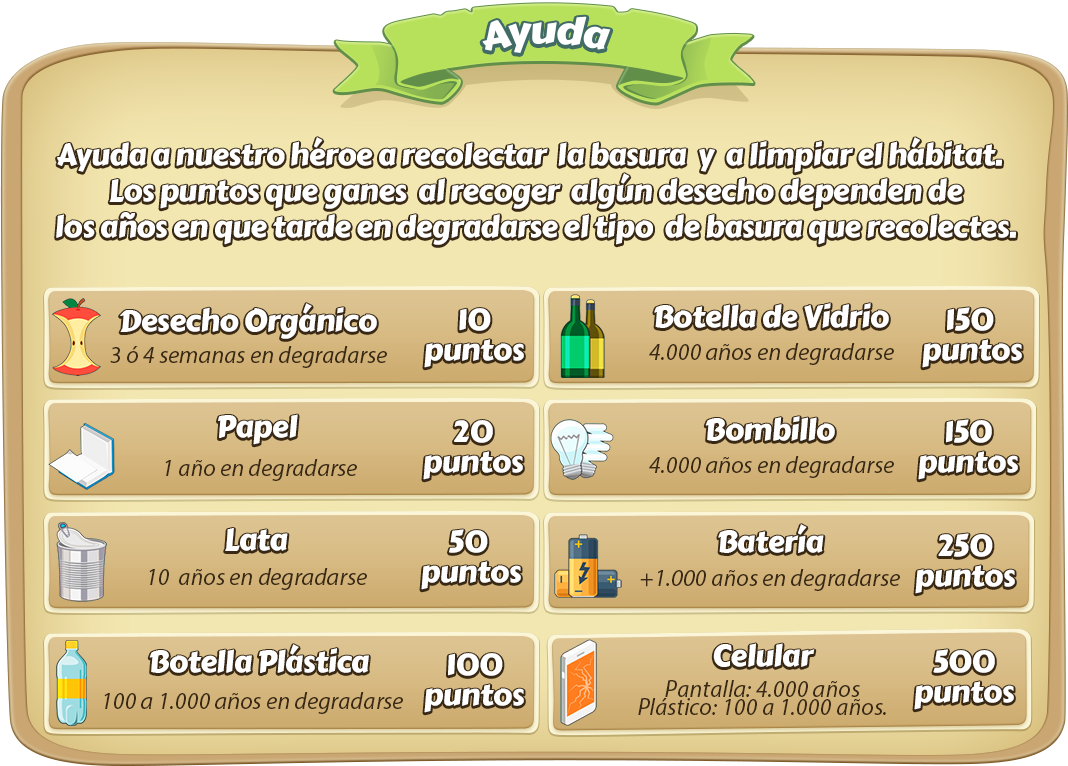
<style>
.page{position:relative;width:1068px;height:766px}
.page>*{position:absolute;margin:0}
.t1{font:38px "CarterOne";letter-spacing:-0.02em;color:#ffffff}
.t2{font:30px "CarterOne";letter-spacing:-0.02em;color:#ffffff}
.t3{font:30px/30px "CarterOne";letter-spacing:-0.02em;color:#ffffff}
.t4{font:24px "MyriadPro-It";color:#382814}
.t5{font:24px/18.3px "MyriadPro-It";color:#382814}
</style>
<div class="page">
<p class="t1" style="left:482px;top:16px;width:129px;height:37px">Ayuda</p>
<p class="t2" style="left:56px;top:137px;width:960px;height:108px;text-align:center">Ayuda a nuestro héroe a recolectar  la basura  y  a limpiar el hábitat.  <br>Los puntos que ganes  al recoger  algún desecho dependen de<br>los años en que tarde en degradarse el tipo  de basura que recolectes.</p>
<p class="t2" style="left:120px;top:303px;width:257px;height:36px">Desecho Orgánico</p>
<p class="t2" style="left:654px;top:303px;width:235px;height:25px">Botella de Vidrio</p>
<p class="t3" style="left:424px;top:308px;width:100px;height:60px;text-align:center">10<br>puntos</p>
<p class="t3" style="left:922px;top:307px;width:100px;height:61px;text-align:center">150 <br>puntos</p>
<p class="t4" style="left:110px;top:346px;width:277px;height:22px">3 ó 4 semanas en degradarse</p>
<p class="t4" style="left:649px;top:343px;width:245px;height:22px">4.000 años en degradarse</p>
<p class="t2" style="left:218px;top:414px;width:80px;height:31px">Papel</p>
<p class="t3" style="left:423px;top:420px;width:100px;height:60px;text-align:center">20<br>puntos</p>
<p class="t2" style="left:705px;top:416px;width:130px;height:25px">Bombillo</p>
<p class="t3" style="left:918px;top:419px;width:100px;height:61px;text-align:center">150<br>puntos</p>
<p class="t4" style="left:165px;top:459px;width:192px;height:22px">1 año en degradarse</p>
<p class="t4" style="left:649px;top:456px;width:245px;height:22px">4.000 años en degradarse</p>
<p class="t2" style="left:225px;top:528px;width:63px;height:23px">Lata</p>
<p class="t3" style="left:421px;top:529px;width:100px;height:61px;text-align:center">50 <br>puntos</p>
<p class="t2" style="left:718px;top:524px;width:106px;height:29px">Batería</p>
<p class="t3" style="left:915px;top:533px;width:100px;height:61px;text-align:center">250<br>puntos</p>
<p class="t4" style="left:149px;top:568px;width:218px;height:22px">10  años en degradarse</p>
<p class="t4" style="left:640px;top:569px;width:260px;height:22px">+1.000 años en degradarse</p>
<p class="t2" style="left:149px;top:644px;width:220px;height:29px">Botella Plástica</p>
<p class="t3" style="left:424px;top:653px;width:100px;height:60px;text-align:center">100<br>puntos</p>
<p class="t2" style="left:713px;top:643px;width:102px;height:24px">Celular</p>
<p class="t3" style="left:914px;top:649px;width:100px;height:61px;text-align:center">500<br>puntos</p>
<p class="t5" style="left:638px;top:680px;width:248px;height:35px;text-align:center">Pantalla: 4.000 años<br>Plástico: 100 a 1.000 años.</p>
<p class="t4" style="left:104px;top:692px;width:299px;height:22px">100 a 1.000 años en degradarse</p>
</div>
